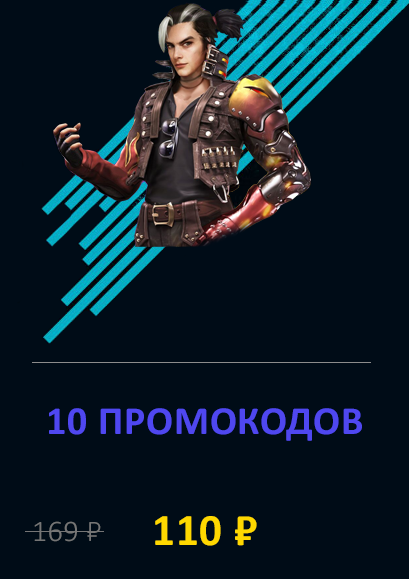
<style>
.page{position:relative;width:409px;height:579px;background:#000c17}
.page>*{position:absolute;margin:0}
.t1{font:40px "Calibri-Bold";letter-spacing:0.02em;color:#4f47f0}
.t2{font:30px "Calibri-Light";letter-spacing:0.02em;color:#757575}
.t3{font:45px "Calibri-Bold";letter-spacing:0.02em;color:#ffd800}
</style>
<div class="page">
<p class="t1" style="left:49px;top:408px;width:313px;height:33px">10 ПРОМОКОДОВ</p>
<p class="t2" style="left:34px;top:521px;width:67px;height:21px">169 ₽</p>
<p class="t3" style="left:155px;top:516px;width:102px;height:30px">110 ₽</p>
</div>
